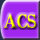
<style>
.page{position:relative;width:40px;height:40px;background:#a027ef}
.page>*{position:absolute;margin:0}
.t1{font:18px "MyungjoXB-HM"}
</style>
<div class="page">
<p class="t1" style="left:4px;top:14px;width:32px;height:14px">ACS</p>
</div>
